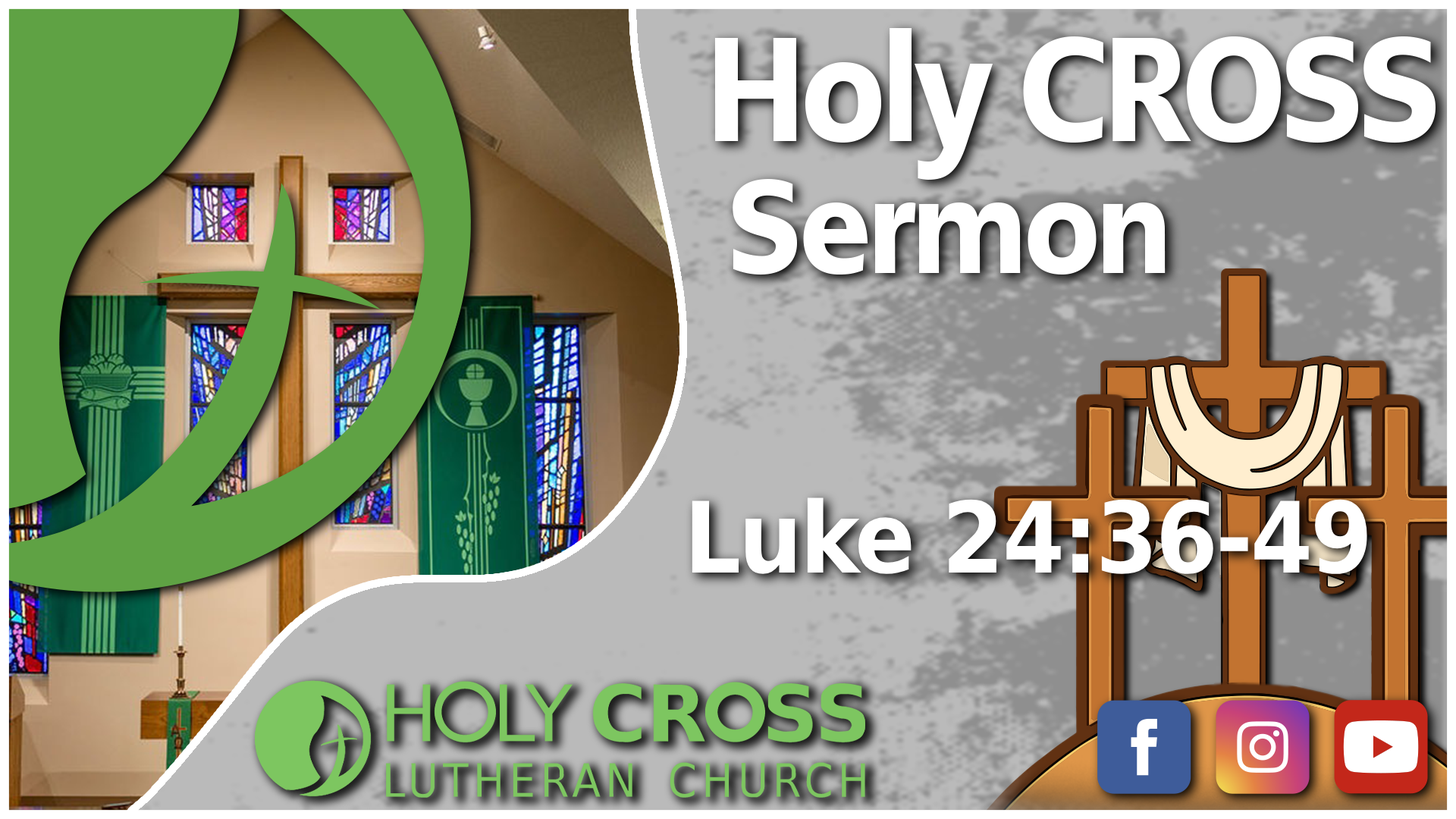
<style>
.page{position:relative;width:1456px;height:819px}
.page>*{position:absolute;margin:0}
.t1{font:147px "PMNCaeciliaSansText-Blk";letter-spacing:-0.025em;color:#ffffff;scale:0.91 1}
.t2{font:132.1px "PMNCaeciliaSansText-Blk";letter-spacing:-0.025em;color:#ffffff;scale:0.91 1}
.t3{font:98.4px "DejaVuSans-Bold";letter-spacing:-0.025em;color:#ffffff;scale:0.91 1}
</style>
<div class="page">
<p class="t1" style="left:714px;top:28px;width:722px;height:152px">Holy CROSS</p>
<p class="t2" style="left:733px;top:179px;width:433px;height:96px">Sermon</p>
<p class="t3" style="left:692px;top:497px;width:675px;height:77px">Luke 24:36-49</p>
</div>
